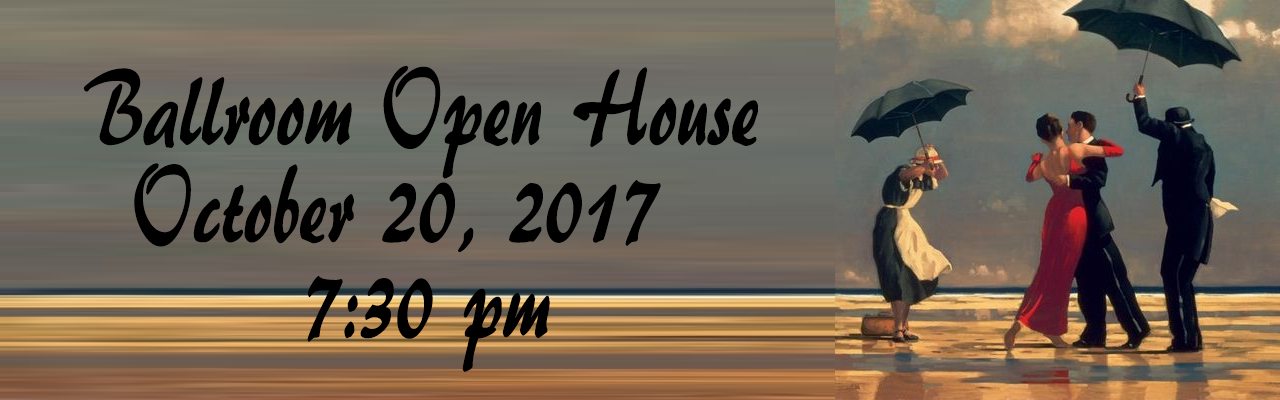
<style>
.page{position:relative;width:1280px;height:400px}
.page>*{position:absolute;margin:0}
.t1{font:112.5px "ARBERKLEY";color:#000000;scale:0.67 1}
</style>
<div class="page">
<p class="t1" style="left:83px;top:65px;width:675px;height:114px">Ballroom Open House</p>
<p class="t1" style="left:134px;top:163px;width:527px;height:89px">October 20, 2017</p>
<p class="t1" style="left:307px;top:275px;width:243px;height:97px">7:30 pm</p>
</div>
